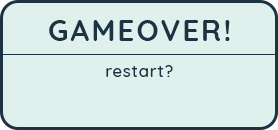
<style>
.page{position:relative;width:278px;height:130px;background:#e0f0ed}
.page>*{position:absolute;margin:0}
.t1{font:29.2px "#9Slide03QuicksandBold-Bold";letter-spacing:0.075em;color:#1c3442;text-transform:uppercase}
.t2{font:16.7px "#9Slide03QuicksandMedium";letter-spacing:0.05em;color:#1c3442}
</style>
<div class="page">
<p class="t1" style="left:49px;top:20px;width:181px;height:21px">gameover!</p>
<p class="t2" style="left:106px;top:65px;width:67px;height:12px">restart?</p>
</div>
